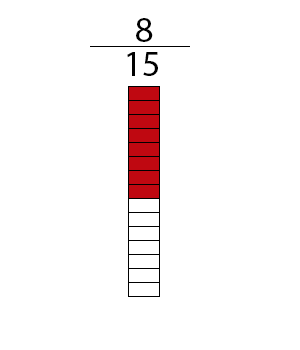
<style>
.page{position:relative;width:300px;height:350px;background:#ffffff}
.page>*{position:absolute;margin:0}
.t1{font:36px "MyriadPro-Regular";color:#000000}
</style>
<div class="page">
<p class="t1" style="left:136px;top:18px;width:17px;height:24px">8</p>
<p class="t1" style="left:127px;top:52px;width:31px;height:24px">15</p>
</div>
